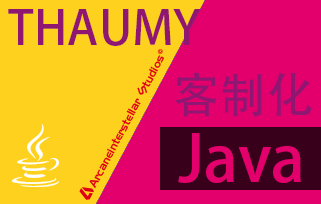
<style>
.page{position:relative;width:321px;height:204px;background:#fdd11e}
.page>*{position:absolute;margin:0}
.t1{font:47.6px "AdobeHeitiStd-Regular";color:#8f1772}
.t2{font:47.8px "AdobeHeitiStd-Regular";color:#8f1772}
.t3{font:64px "AdobeHeitiStd-Regular";color:#e5006c}
</style>
<div class="page">
<p class="t1" style="left:8px;top:9px;width:193px;height:37px">THAUMY</p>
<p class="t2" style="left:175px;top:72px;width:137px;height:45px">客制化</p>
<p class="t3" style="left:178px;top:133px;width:123px;height:50px">Java</p>
</div>
